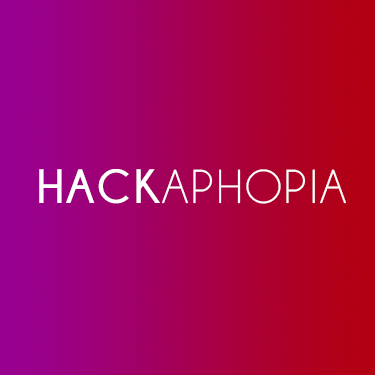
<style>
.page{position:relative;width:375px;height:375px}
.page>*{position:absolute;margin:0}
.t1{font:48px "Champagne&Limousines";letter-spacing:0.06em;color:#ffffff}
.t2{font:48px "Champagne&Limousines-Bold";letter-spacing:0.06em;color:#ffffff}
</style>
<div class="page">
<p class="t1" style="left:39px;top:169px;width:307px;height:35px"><span class="t2">HACK</span>APHOPIA</p>
</div>
